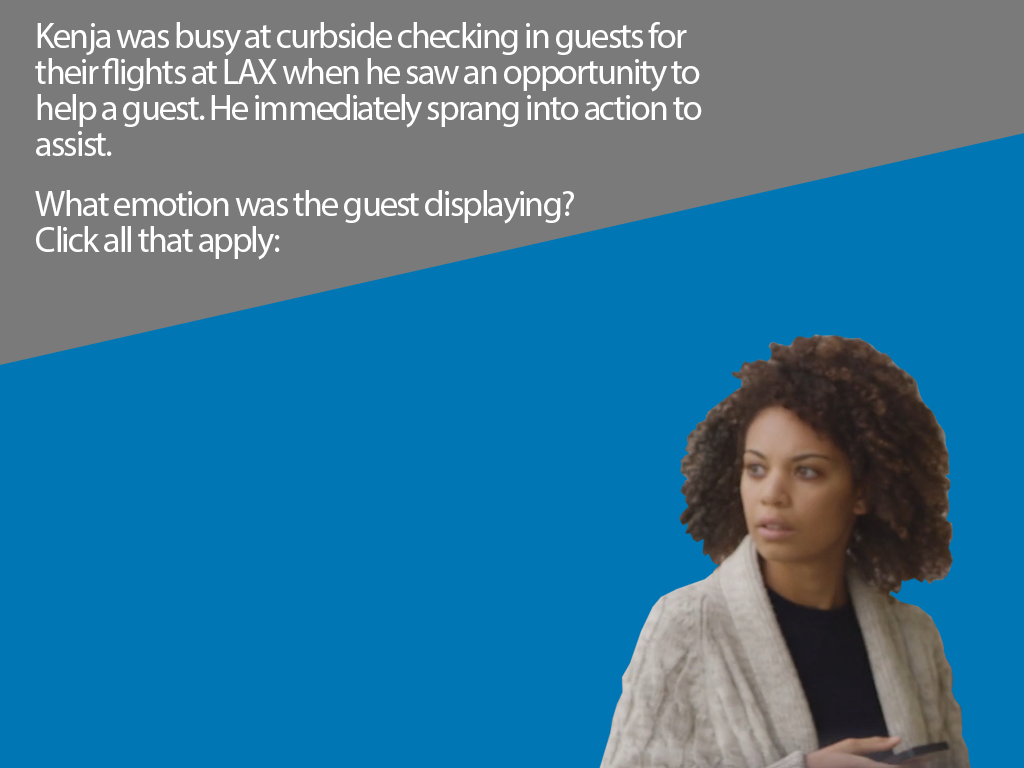
<style>
.page{position:relative;width:1024px;height:768px;background:#0076b4}
.page>*{position:absolute;margin:0}
.t1{font:36px/36px "MyriadPro-Regular";letter-spacing:-0.05em;color:#ffffff}
</style>
<div class="page">
<p class="t1" style="left:35px;top:22px;width:667px;height:238px">Kenja was busy at curbside checking in guests for their flights at LAX when he saw an opportunity to help a guest. He immediately sprang into action to assist.<br><br>What emotion was the guest displaying?<br>Click all that apply:</p>
</div>
